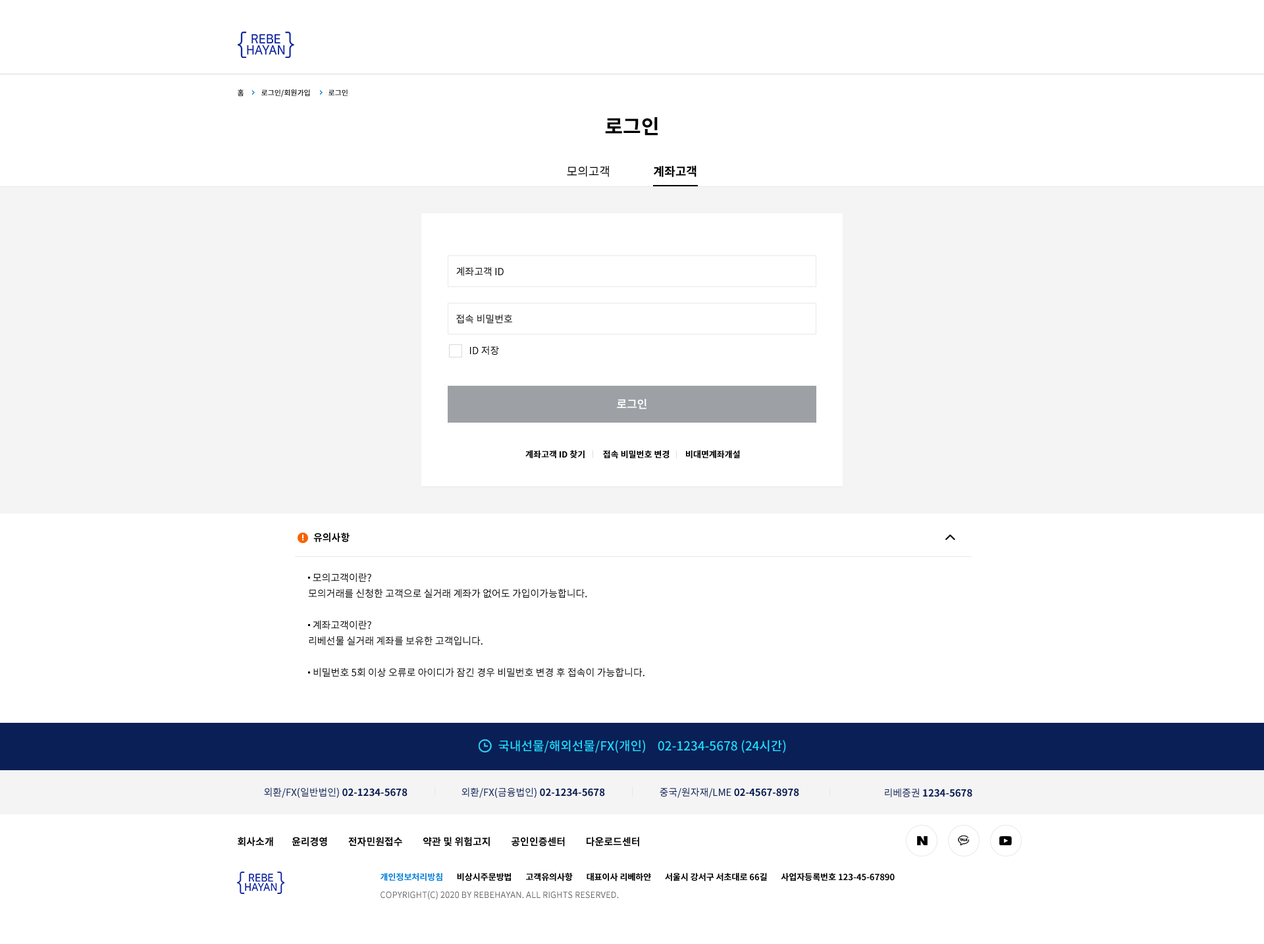
<style>
.page{position:relative;width:1264px;height:944px;background:#ffffff}
.page>*{position:absolute;margin:0}
.t1{font:7.2px "NotoSansKR-Medium";color:#000000}
.t2{font:19.7px "NotoSansKR-Bold";color:#000000}
.t3{font:11.8px "NotoSansKR-Regular";color:#000000}
.t4{font:11.8px "NotoSansKR-Bold";color:#000000}
.t5{font:9.9px "NotoSansKR-Regular";color:#000000}
.t6{font:11.2px "NotoSansKR-Bold";color:#fefefe}
.t7{font:8.6px "NotoSansKR-Bold";color:#000000}
.t8{font:9.9px "NotoSansKR-Bold";color:#000000}
.t9{font:9.9px/15.8px "NotoSansKR-Regular";color:#000000}
.t10{font:12.5px "NotoSansKR-Medium";color:#1dddfd}
.t11{font:9.9px "NotoSansKR-Bold";color:#081b50}
.t12{font:9.9px "NotoSansKR-Regular";color:#081b50}
.t13{font:8.6px "NotoSansKR-Bold";color:#067fd9}
.t14{font:8.6px "NotoSansKR-Regular";color:#66666a}
</style>
<div class="page">
<p class="t1" style="left:238px;top:89px;width:5px;height:7px">홈</p>
<p class="t1" style="left:261px;top:89px;width:49px;height:8px">로그인/회원가입</p>
<p class="t1" style="left:328px;top:90px;width:19px;height:6px">로그인</p>
<p class="t2" style="left:605px;top:117px;width:52px;height:19px">로그인</p>
<p class="t3" style="left:567px;top:166px;width:42px;height:11px">모의고객</p>
<p class="t4" style="left:653px;top:165px;width:43px;height:12px">계좌고객</p>
<p class="t5" style="left:456px;top:267px;width:47px;height:9px">계좌고객 ID</p>
<p class="t5" style="left:456px;top:314px;width:56px;height:10px">접속 비밀번호</p>
<p class="t5" style="left:470px;top:346px;width:29px;height:9px">ID 저장</p>
<p class="t6" style="left:617px;top:399px;width:29px;height:10px">로그인</p>
<p class="t7" style="left:525px;top:450px;width:215px;height:9px">계좌고객 ID 찾기         접속 비밀번호 변경        비대면계좌개설</p>
<p class="t8" style="left:313px;top:532px;width:36px;height:10px">유의사항</p>
<p class="t9" style="left:308px;top:573px;width:279px;height:25px">모의고객이란?<br>모의거래를 신청한 고객으로 실거래 계좌가 없어도 가입이가능합니다.</p>
<p class="t9" style="left:309px;top:620px;width:173px;height:26px">계좌고객이란?<br>리베선물 실거래 계좌를 보유한 고객입니다.</p>
<p class="t5" style="left:313px;top:667px;width:331px;height:10px">비밀번호 5회 이상 오류로 아이디가 잠긴 경우 비밀번호 변경 후 접속이 가능합니다.</p>
<p class="t10" style="left:498px;top:740px;width:288px;height:13px">국내선물/해외선물/FX(개인)    02-1234-5678 (24시간)</p>
<p class="t11" style="left:264px;top:787px;width:143px;height:11px"><span class="t12">외환/FX(일반법인) </span>02-1234-5678</p>
<p class="t11" style="left:461px;top:787px;width:144px;height:11px"><span class="t12">외환/FX(금융법인) </span>02-1234-5678</p>
<p class="t11" style="left:659px;top:787px;width:140px;height:11px"><span class="t12">중국/원자재/LME </span>02-4567-8978</p>
<p class="t11" style="left:884px;top:788px;width:88px;height:9px"><span class="t12">리베증권 </span>1234-5678</p>
<p class="t8" style="left:238px;top:836px;width:401px;height:10px">회사소개        윤리경영         전자민원접수         약관 및 위험고지         공인인증센터         다운로드센터</p>
<p class="t7" style="left:380px;top:873px;width:514px;height:8px"><span class="t13">개인정보처리방침</span>       비상시주문방법       고객유의사항       대표이사 리베하얀       서울시 강서구 서초대로 66길       사업자등록번호 123-45-67890</p>
<p class="t14" style="left:380px;top:890px;width:239px;height:10px">COPYRIGHT(C) 2020 BY REBEHAYAN. ALL RIGHTS RESERVED.</p>
</div>
